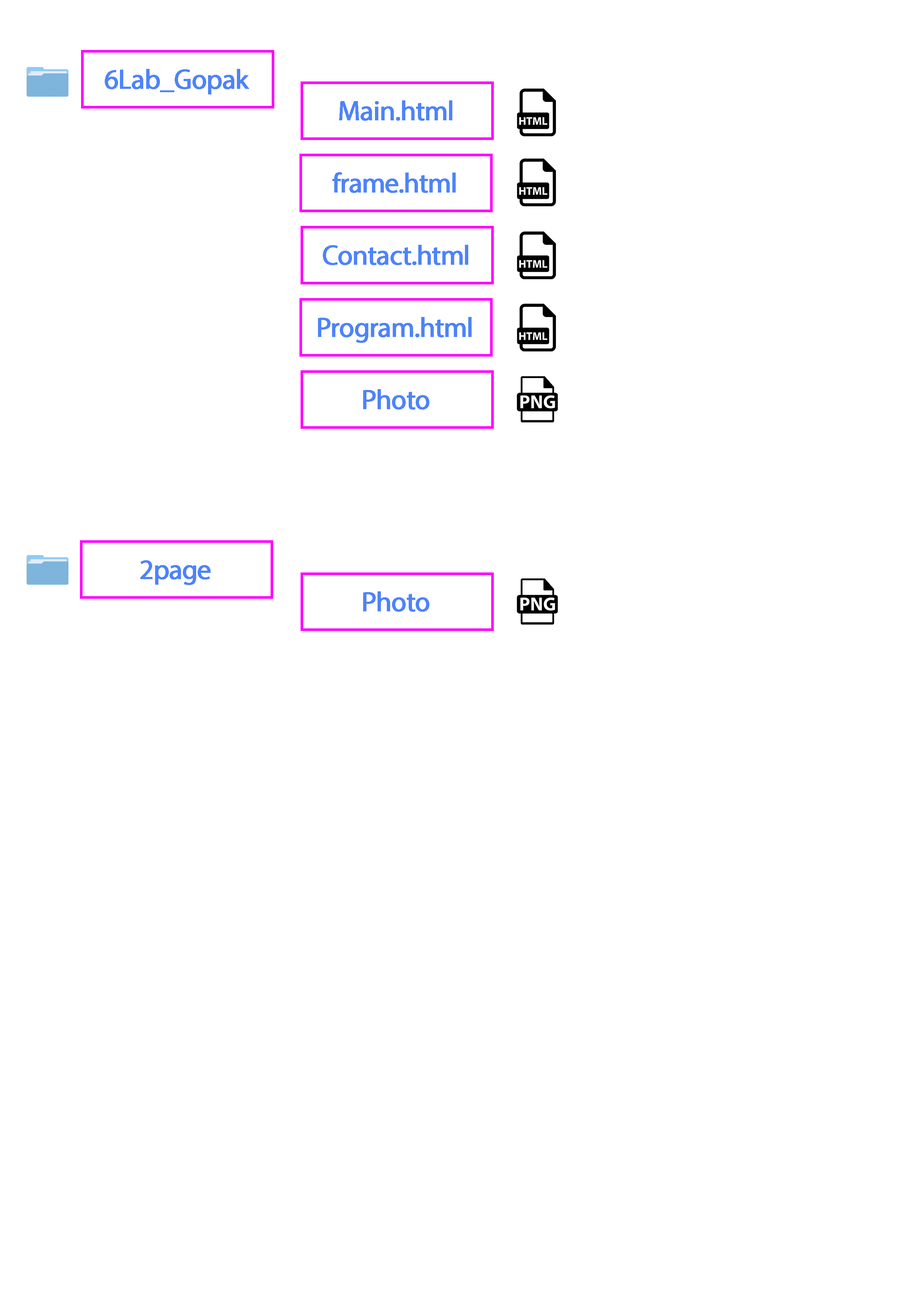
<style>
.page{position:relative;width:918px;height:1299px;background:#ffffff}
.page>*{position:absolute;margin:0}
.t1{font:27.8px "MyriadPro-Regular";letter-spacing:-0.035em;color:#4e83fa;font-weight:bold}
</style>
<div class="page">
<p class="t1" style="left:105px;top:69px;width:144px;height:25px">6Lab_Gopak</p>
<p class="t1" style="left:339px;top:100px;width:113px;height:21px">Main.html</p>
<p class="t1" style="left:332px;top:172px;width:124px;height:21px">frame.html</p>
<p class="t1" style="left:323px;top:245px;width:145px;height:20px">Contact.html</p>
<p class="t1" style="left:318px;top:317px;width:154px;height:26px">Program.html</p>
<p class="t1" style="left:363px;top:389px;width:66px;height:20px">Photo</p>
<p class="t1" style="left:140px;top:560px;width:71px;height:25px">2page</p>
<p class="t1" style="left:363px;top:591px;width:66px;height:21px">Photo</p>
</div>
